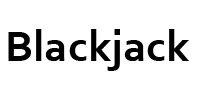
<style>
.page{position:relative;width:197px;height:100px;background:#ffffff}
.page>*{position:absolute;margin:0}
.t1{font:45.1px "Corbel-Bold";color:#000000}
</style>
<div class="page">
<p class="t1" style="left:8px;top:29px;width:181px;height:42px">Blackjack</p>
</div>
